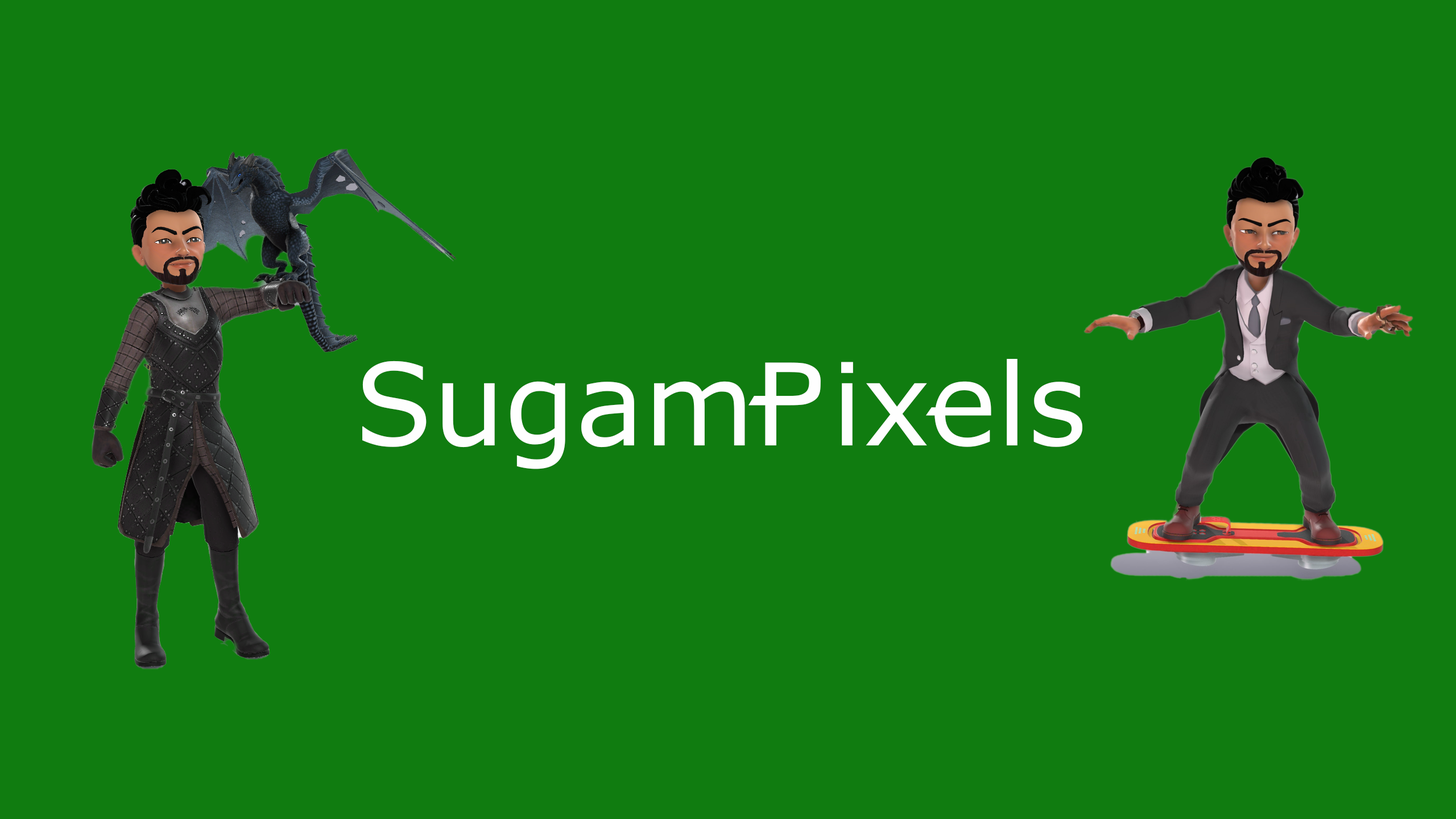
<style>
.page{position:relative;width:1456px;height:819px;background:#107c10}
.page>*{position:absolute;margin:0}
.t1{font:113.7px "XBOX360";color:#fefefe}
</style>
<div class="page">
<p class="t1" style="left:362px;top:359px;width:720px;height:110px">SugamPixels</p>
</div>
